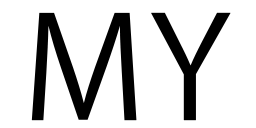
<style>
.page{position:relative;width:256px;height:128px;background:#ffffff}
.page>*{position:absolute;margin:0}
.t1{font:140.9px "KozGoPr6N-Regular";color:#000000;font-weight:bold}
</style>
<div class="page">
<p class="t1" style="left:31px;top:12px;width:200px;height:109px">MY</p>
</div>
